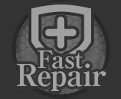
<style>
.page{position:relative;width:121px;height:99px;background:#333333}
.page>*{position:absolute;margin:0}
.t1{font:30px/18px "RyuminPro-ExBold";letter-spacing:-0.04em;color:#a4a4a4}
.t2{font:24px/18px "RyuminPro-ExBold";letter-spacing:-0.04em;color:#a4a4a4}
</style>
<div class="page">
<p class="t1" style="left:17px;top:50px;width:89px;height:41px;text-align:center"><span class="t2">Fast<br></span>Repair</p>
</div>
